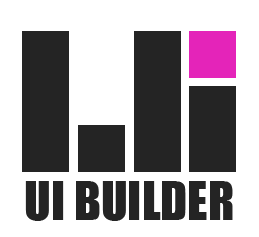
<style>
.page{position:relative;width:259px;height:237px;background:#ffffff}
.page>*{position:absolute;margin:0}
.t1{font:49px "Impact";color:#242424}
</style>
<div class="page">
<p class="t1" style="left:25px;top:181px;width:208px;height:40px">UI BUILDER</p>
</div>
